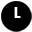
<style>
.page{position:relative;width:32px;height:32px;background:#000000}
.page>*{position:absolute;margin:0}
.t1{font:14.4px "Futura-Bold";color:#ffffff}
</style>
<div class="page">
<p class="t1" style="left:14px;top:7px;width:7px;height:11px">L</p>
</div>
